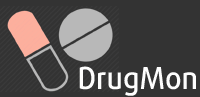
<style>
.page{position:relative;width:200px;height:97px;background:#333333}
.page>*{position:absolute;margin:0}
.t1{font:30.5px "UTM-Daxline-Medium";color:#fefefe}
</style>
<div class="page">
<p class="t1" style="left:79px;top:66px;width:117px;height:30px">DrugMon</p>
</div>
